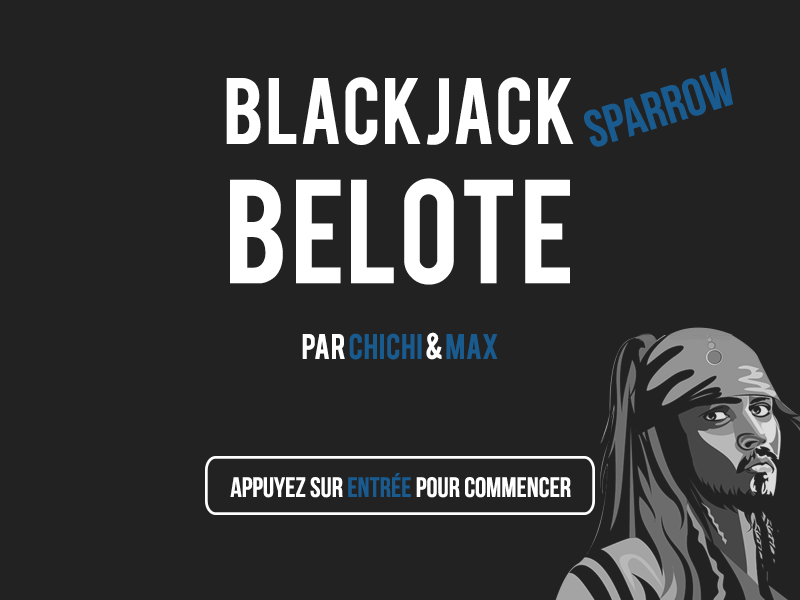
<style>
.page{position:relative;width:800px;height:600px;background:#222222}
.page>*{position:absolute;margin:0}
.t1{font:74px "Bebas";color:#ffffff}
.t2{font:116px "Bebas";color:#ffffff}
.t3{font:52.5px "BebasNeue";color:#195b8e}
.t4{font:28px "Bebas";color:#195b8e}
.t5{font:28px "Bebas";color:#ffffff}
.t6{font:28px "BebasNeue";color:#ffffff}
.t7{font:28px "BebasNeue";color:#195b8e}
</style>
<div class="page">
<p class="t1" style="left:226px;top:77px;width:348px;height:208px;text-align:center">BLACKJACK<br><span class="t2">BELOTE</span></p>
<p class="t3" style="left:584px;top:67px;width:149px;height:80px;rotate:-17deg">SPARROW</p>
<p class="t4" style="left:302px;top:332px;width:196px;height:28px"><span class="t5">PAR </span>CHICHI <span class="t5">&amp; </span>MAX</p>
<p class="t6" style="left:230px;top:473px;width:341px;height:25px">APPUYEZ SUR <span class="t7">ENTRéE </span>POUR COMMENCER</p>
</div>
